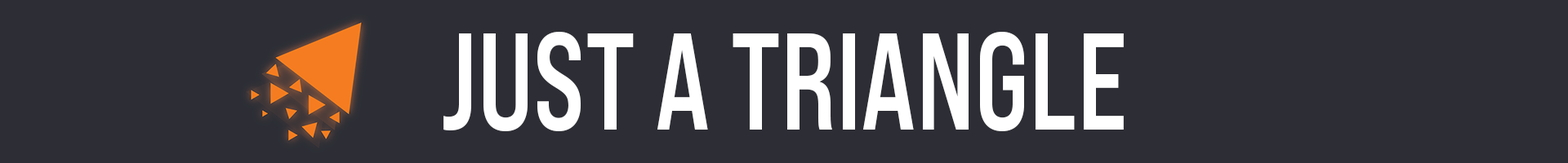
<style>
.page{position:relative;width:1568px;height:163px;background:#2d2e35}
.page>*{position:absolute;margin:0}
.t1{font:137.4px "BebasNeuePro-ExpBd";color:#ffffff;text-transform:uppercase;scale:0.78 1}
</style>
<div class="page">
<p class="t1" style="left:443px;top:32px;width:681px;height:99px">Just a Triangle</p>
</div>
